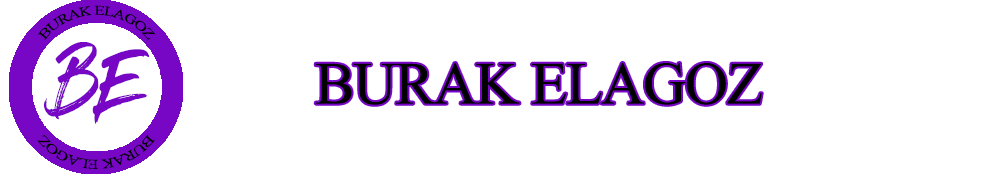
<style>
.page{position:relative;width:1000px;height:175px;background:#ffffff}
.page>*{position:absolute;margin:0}
.t1{font:13.2px/2.2px "TimesNewRomanPSMT";letter-spacing:-0.025em;color:#000000}
.t2{font:64.5px "GlossAndBloom";letter-spacing:-0.025em;color:#7707c5}
.t3{font:60px "TimesNewRomanPSMT";letter-spacing:-0.025em;color:#000000}
.t4{font:13.2px "TimesNewRomanPSMT";letter-spacing:-0.025em;color:#000000}
</style>
<div class="page">
<p class="t1" style="left:38px;top:5px;width:118px;height:35px;text-align:center">BURAK ELAGOZ</p>
<p class="t2" style="left:43px;top:42px;width:106px;height:82px">BE</p>
<p class="t3" style="left:315px;top:63px;width:447px;height:42px">BURAK ELAGOZ</p>
<p class="t4" style="left:37px;top:134px;width:118px;height:35px;rotate:180deg">BURAK ELAGOZ</p>
</div>
